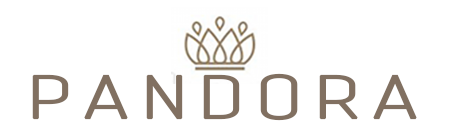
<style>
.page{position:relative;width:454px;height:130px;background:#ffffff}
.page>*{position:absolute;margin:0}
.t1{font:60px "WebServeroff";letter-spacing:0.08em;color:#827161;font-weight:bold;scale:1.85 1}
</style>
<div class="page">
<p class="t1" style="left:32px;top:73px;width:385px;height:48px">PANDORA</p>
</div>
